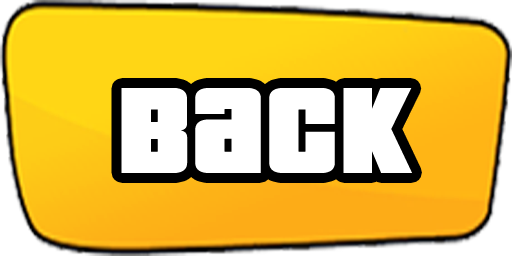
<style>
.page{position:relative;width:512px;height:256px;background:#ffffff}
.page>*{position:absolute;margin:0}
.t1{font:133.3px "PricedownBl-Regular";letter-spacing:0.012em;color:#ffffff;scale:1.05 1}
</style>
<div class="page">
<p class="t1" style="left:121px;top:88px;width:291px;height:85px">Back</p>
</div>
